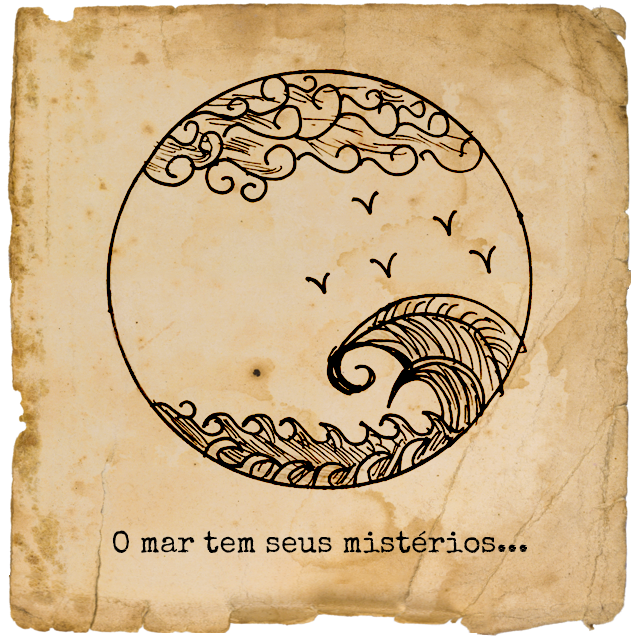
<style>
.page{position:relative;width:640px;height:640px}
.page>*{position:absolute;margin:0}
.t1{font:30.6px "SpecialElite-Regular";color:#000000}
</style>
<div class="page">
<p class="t1" style="left:112px;top:530px;width:415px;height:24px">O mar tem seus mistérios...</p>
</div>
